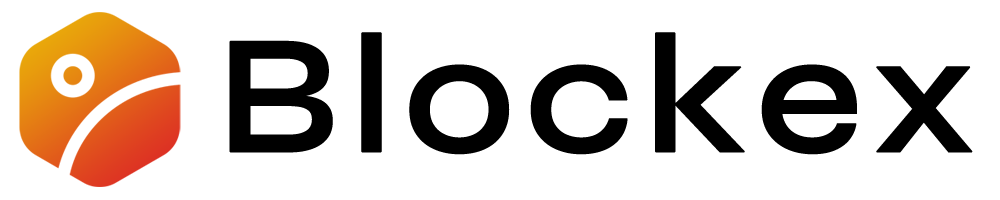
<style>
.page{position:relative;width:1000px;height:200px;background:#ffffff}
.page>*{position:absolute;margin:0}
.t1{font:170px "Syne-SemiBold";letter-spacing:0.035em;color:#000000;font-weight:bold}
</style>
<div class="page">
<p class="t1" style="left:229px;top:32px;width:744px;height:123px">Blockex</p>
</div>
